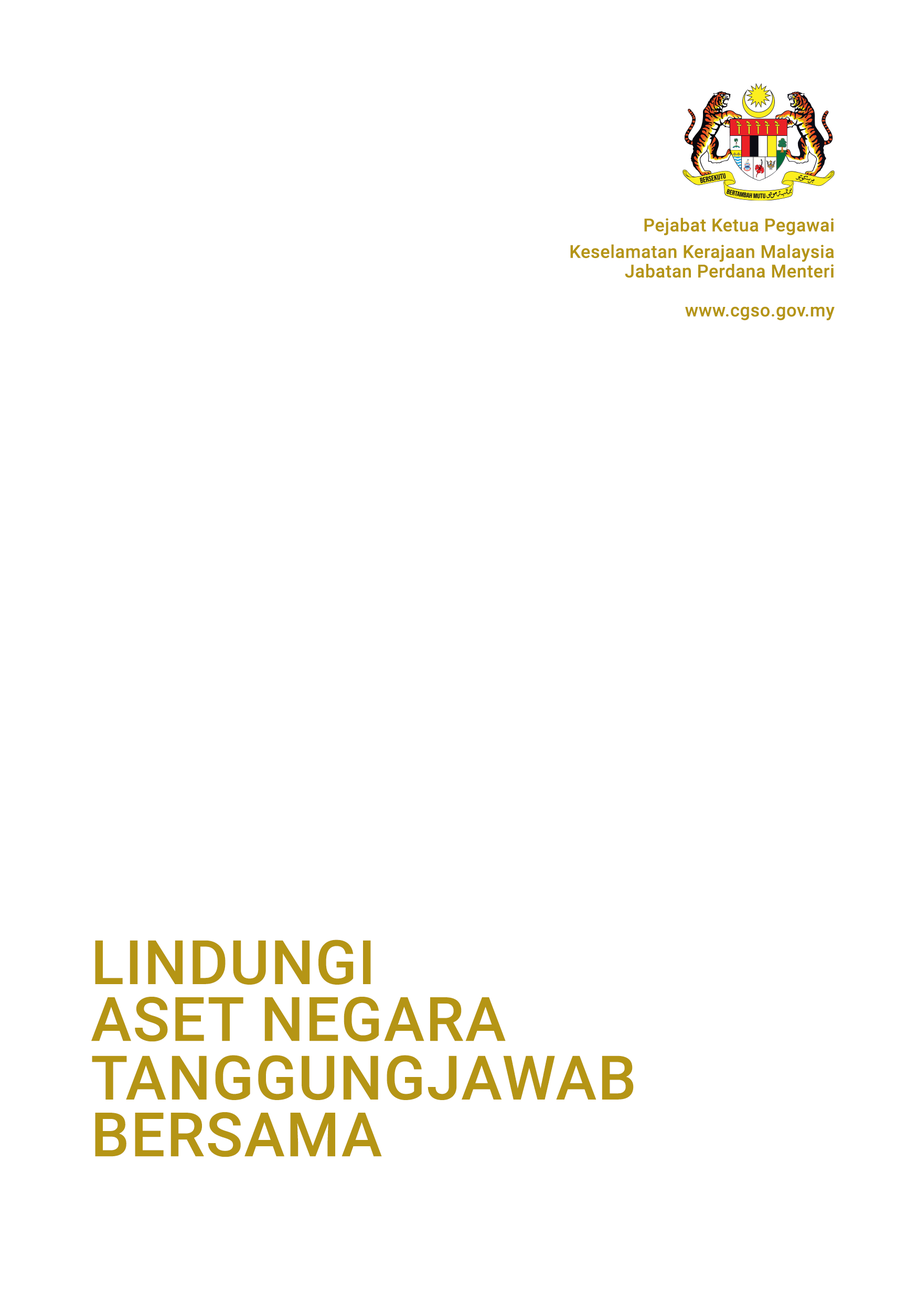
<style>
.page{position:relative;width:917px;height:1301px;background:#ffffff}
.page>*{position:absolute;margin:0}
.t1{font:17.9px "Roboto-Medium";letter-spacing:0.02em;color:#b59515}
.t2{font:17.9px/19.5px "Roboto-Medium";letter-spacing:0.02em;color:#b59515}
.t3{font:61.2px/56.8px "Roboto-Medium";letter-spacing:0.02em;color:#b59515}
</style>
<div class="page">
<p class="t1" style="left:644px;top:218px;width:189px;height:17px">Pejabat Ketua Pegawai</p>
<p class="t2" style="left:570px;top:244px;width:264px;height:76px;text-align:right">Keselamatan Kerajaan Malaysia<br>Jabatan Perdana Menteri<br><br>www.cgso.gov.my</p>
<p class="t3" style="left:91px;top:939px;width:415px;height:103px">LINDUNGI<br>ASET NEGARA</p>
<p class="t3" style="left:92px;top:1055px;width:542px;height:102px">TANGGUNGJAWAB<br>BERSAMA</p>
</div>
